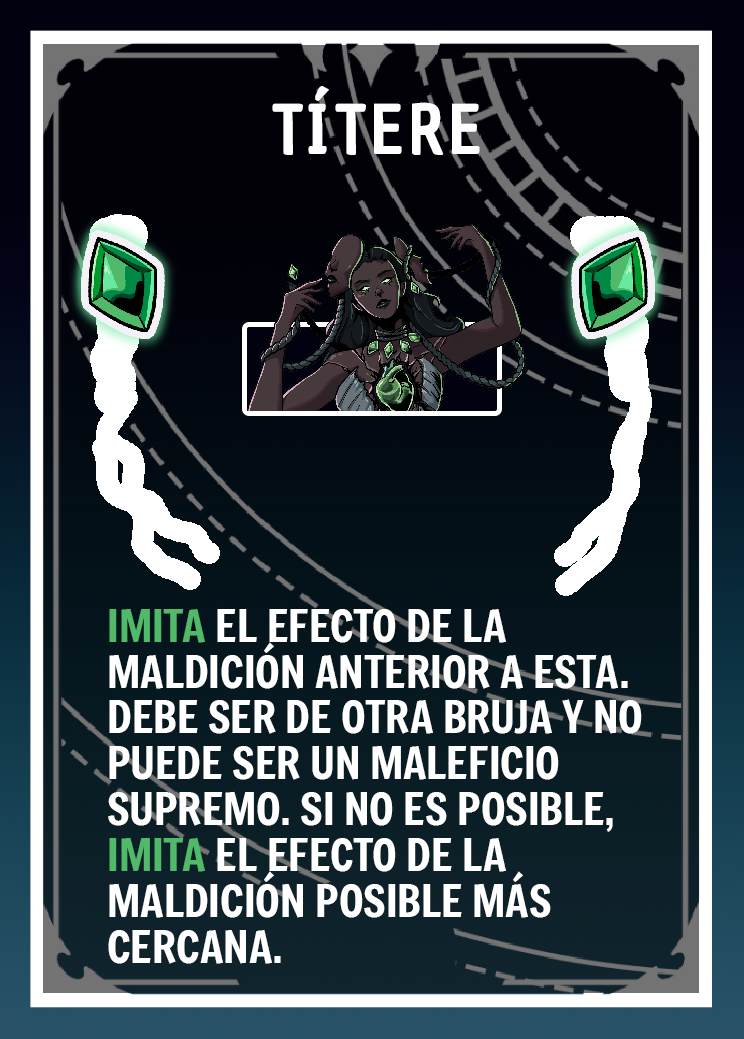
<style>
.page{position:relative;width:744px;height:1039px}
.page>*{position:absolute;margin:0}
.t1{font:66.7px "ChauPhilomeneOne-Regular";letter-spacing:0.075em;color:#ffffff}
.t2{font:43.7px/45.8px "Freeman-Regular";color:#ffffff}
.t3{font:43.7px/45.8px "Freeman-Regular";color:#51b96a}
</style>
<div class="page">
<p class="t1" style="left:272px;top:86px;width:208px;height:69px">TÍTERE</p>
<p class="t2" style="left:108px;top:608px;width:534px;height:356px"><span class="t3">IMITA</span> EL EFECTO DE LA MALDICIÓN ANTERIOR A ESTA. DEBE SER DE OTRA BRUJA Y NO PUEDE SER UN MALEFICIO SUPREMO. SI NO ES POSIBLE, <span class="t3">IMITA</span> EL EFECTO DE LA MALDICIÓN POSIBLE MÁS CERCANA.</p>
</div>
